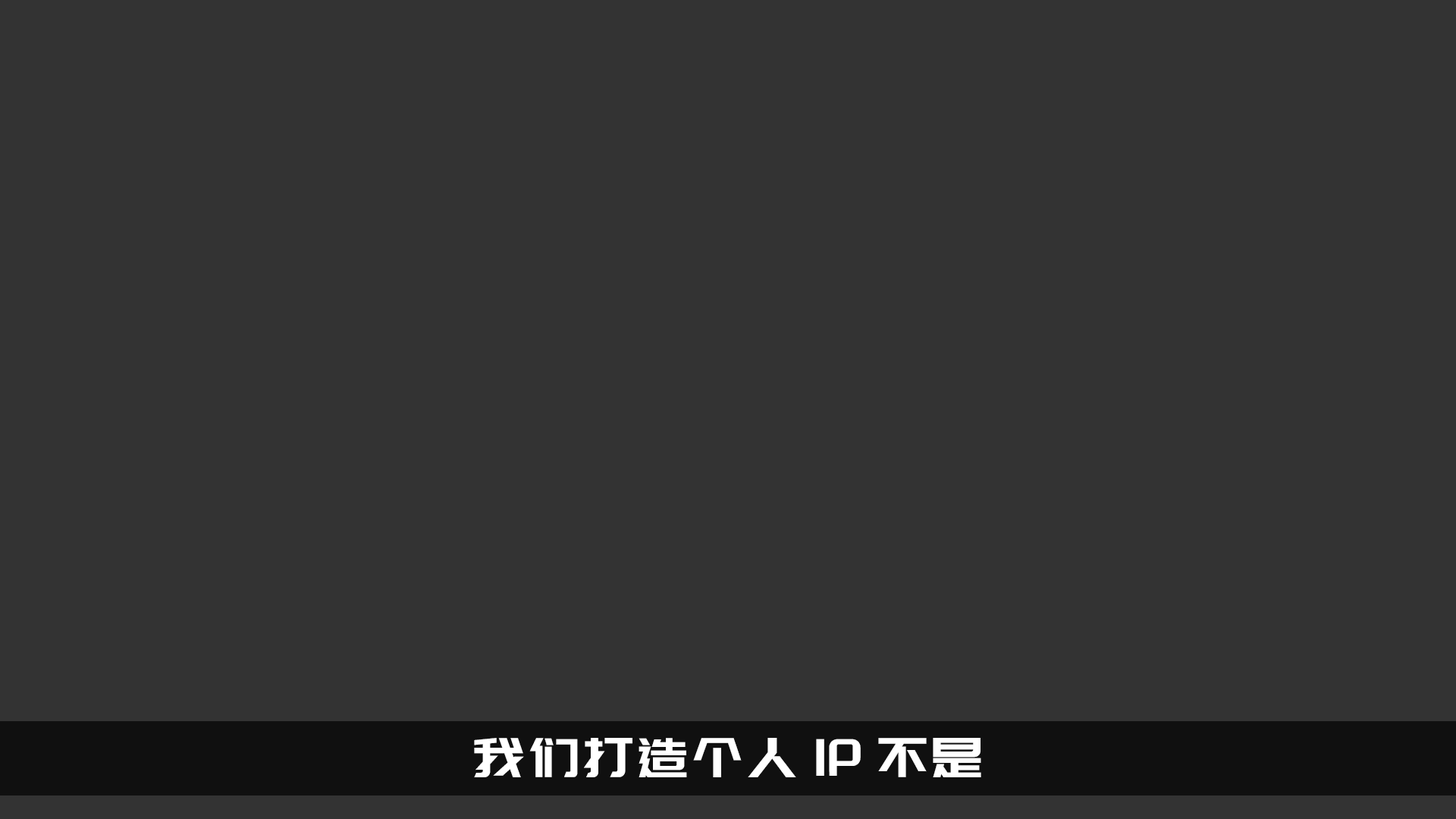
<style>
.page{position:relative;width:1456px;height:819px;background:#333333}
.page>*{position:absolute;margin:0}
.t1{font:54.6px "PangMenZhengDao-3";color:#ffffff}
</style>
<div class="page">
<p class="t1" style="left:474px;top:738px;width:507px;height:39px">我们打造个人IP不是</p>
</div>
